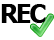
<style>
.page{position:relative;width:54px;height:40px;background:#ffffff}
.page>*{position:absolute;margin:0}
.t1{font:25px "Tahoma-Bold";letter-spacing:-0.075em;color:#000000}
</style>
<div class="page">
<p class="t1" style="left:1px;top:4px;width:45px;height:19px">REC</p>
</div>
